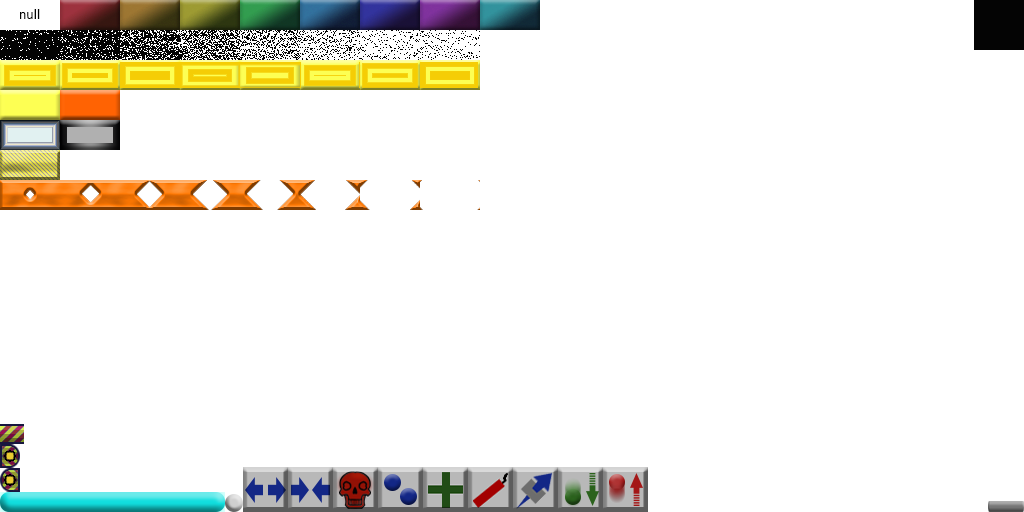
<style>
.page{position:relative;width:1024px;height:512px;background:#ffffff}
.page>*{position:absolute;margin:0}
.t1{font:14px "Calibri";color:#030303}
</style>
<div class="page">
<p class="t1" style="left:20px;top:9px;width:20px;height:10px">null</p>
</div>
